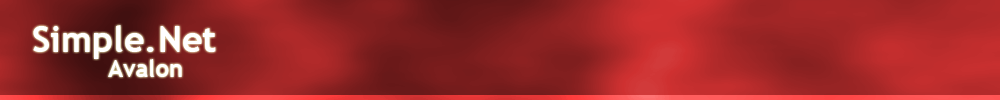
<style>
.page{position:relative;width:1000px;height:100px}
.page>*{position:absolute;margin:0}
.t1{font:36px "TrebuchetMS-Bold";color:#ffffff}
.t2{font:24px "TrebuchetMS-Bold";color:#ffffff}
</style>
<div class="page">
<p class="t1" style="left:33px;top:25px;width:183px;height:34px">Simple.Net</p>
<p class="t2" style="left:108px;top:59px;width:74px;height:18px">Avalon</p>
</div>
